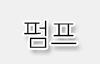
<style>
.page{position:relative;width:100px;height:64px;background:#f0f0f0}
.page>*{position:absolute;margin:0}
.t1{font:30px "NanumSquareL";color:#000000}
</style>
<div class="page">
<p class="t1" style="left:24px;top:20px;width:53px;height:28px">펌프</p>
</div>
